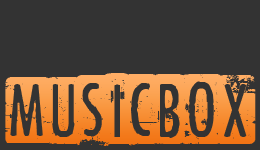
<style>
.page{position:relative;width:260px;height:150px;background:#333333}
.page>*{position:absolute;margin:0}
.t1{font:71.7px "PunkRockShow-Regular";scale:1.09 1}
</style>
<div class="page">
<p class="t1" style="left:5px;top:73px;width:251px;height:73px">musicbox</p>
</div>
